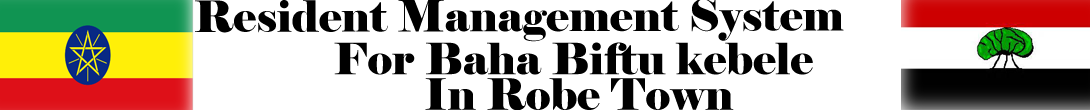
<style>
.page{position:relative;width:1090px;height:110px;background:#ffffff}
.page>*{position:absolute;margin:0}
.t1{font:43.2px "Elephant-Regular";color:#000000}
.t2{font:43.2px/35.4px "Elephant-Regular";color:#000000}
</style>
<div class="page">
<p class="t1" style="left:195px;top:0px;width:649px;height:42px">Resident Management System</p>
<p class="t2" style="left:334px;top:42px;width:479px;height:69px;text-align:center">For Baha Biftu kebele <br>In Robe Town</p>
</div>
